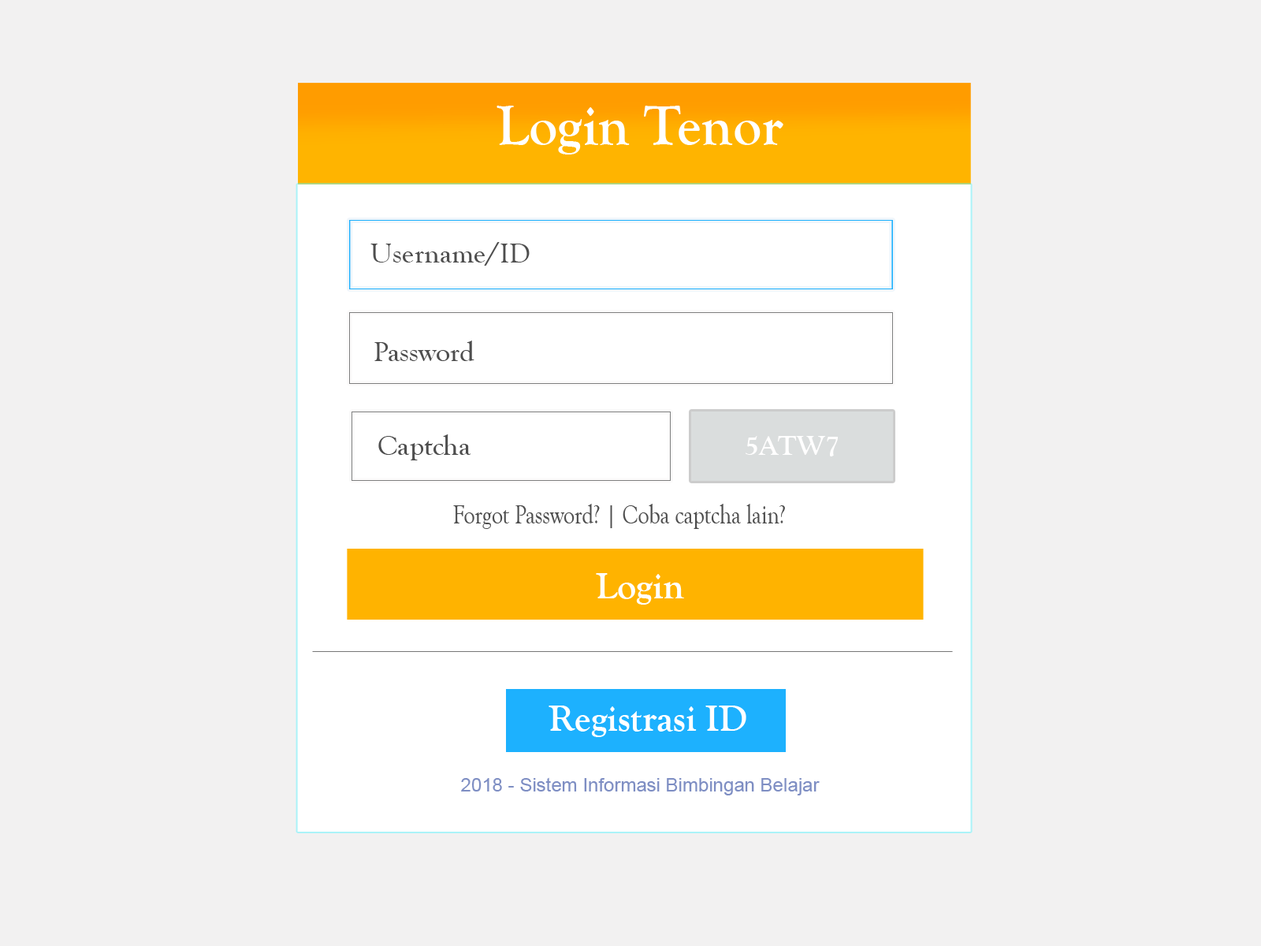
<style>
.page{position:relative;width:1261px;height:946px;background:#f2f1f1}
.page>*{position:absolute;margin:0}
.t1{font:56.7px "GoudyOldStyleT-Bold";color:#ffffff}
.t2{font:28.4px "GoudyOldStyleT-Regular";color:#4e4e4e}
.t3{font:28.4px "GoudyOldStyleT-Bold";color:#fffefe}
.t4{font:27.8px "GoudyOldStyleT-Regular";color:#4e4e4e;scale:0.79 1}
.t5{font:37.8px "GoudyOldStyleT-Bold";color:#ffffff}
.t6{font:18.9px "ArialMT";color:#7e8ec3}
</style>
<div class="page">
<p class="t1" style="left:496px;top:106px;width:287px;height:48px">Login Tenor</p>
<p class="t2" style="left:370px;top:242px;width:160px;height:24px">Username/ID</p>
<p class="t2" style="left:374px;top:340px;width:100px;height:21px">Password</p>
<p class="t2" style="left:378px;top:434px;width:93px;height:26px">Captcha</p>
<p class="t3" style="left:746px;top:436px;width:92px;height:20px">5ATW7</p>
<p class="t4" style="left:453px;top:504px;width:332px;height:25px">Forgot Password? | Coba captcha lain?</p>
<p class="t5" style="left:596px;top:573px;width:88px;height:31px">Login</p>
<p class="t5" style="left:548px;top:705px;width:198px;height:32px">Registrasi ID</p>
<p class="t6" style="left:461px;top:777px;width:359px;height:18px">2018 - Sistem Informasi Bimbingan Belajar</p>
</div>
